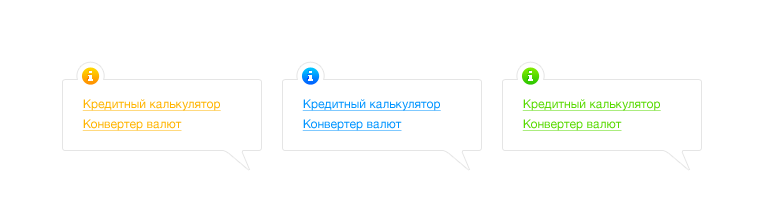
<style>
.page{position:relative;width:767px;height:224px;background:#ffffff}
.page>*{position:absolute;margin:0}
.t1{font:12px "HelveticaNeue";color:#ffb400;text-decoration:underline}
.t2{font:12px "HelveticaNeue";color:#0094ff;text-decoration:underline}
.t3{font:12px "HelveticaNeue";color:#57d900;text-decoration:underline}
</style>
<div class="page">
<p class="t1" style="left:82px;top:99px;width:139px;height:12px">Кредитный калькулятор</p>
<p class="t2" style="left:302px;top:99px;width:139px;height:12px">Кредитный калькулятор</p>
<p class="t3" style="left:522px;top:99px;width:139px;height:12px">Кредитный калькулятор</p>
<p class="t1" style="left:82px;top:119px;width:100px;height:12px">Конвертер валют</p>
<p class="t2" style="left:302px;top:119px;width:100px;height:12px">Конвертер валют</p>
<p class="t3" style="left:522px;top:119px;width:100px;height:12px">Конвертер валют</p>
</div>
